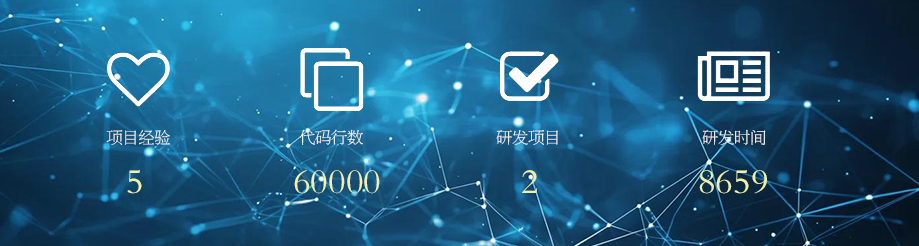
<style>
.page{position:relative;width:919px;height:246px}
.page>*{position:absolute;margin:0}
.t1{font:16px "FZBSK--GBK1-0";color:#ffffff}
.t2{font:36px "FZBSK--GBK1-0";color:#edf1ae}
</style>
<div class="page">
<p class="t1" style="left:106px;top:129px;width:660px;height:16px">项目经验                             代码行数                              研发项目                                研发时间</p>
<p class="t2" style="left:127px;top:170px;width:640px;height:24px">5               60000              2                8659</p>
</div>
